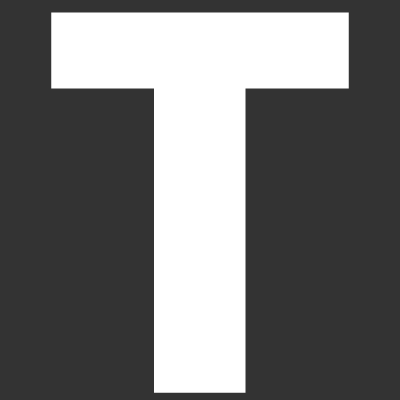
<style>
.page{position:relative;width:400px;height:400px;background:#333333}
.page>*{position:absolute;margin:0}
.t1{font:255.3px "SourceHanSansCN-Heavy";color:#ffffff}
</style>
<div class="page">
<p class="t1" style="left:51px;top:12px;width:298px;height:381px">T</p>
</div>
